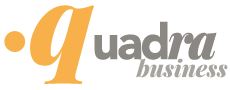
<style>
.page{position:relative;width:230px;height:90px;background:#ffffff}
.page>*{position:absolute;margin:0}
.t1{font:109.8px "PlayfairDisplay-BlackItalic";letter-spacing:-0.05em;color:#f8b04a}
.t2{font:49px "Avenir-Black";letter-spacing:-0.055em;color:#8b8782}
.t3{font:49px "PlayfairDisplay-BlackItalic";letter-spacing:-0.055em;color:#8b8782}
.t4{font:23px "PlayfairDisplay-BlackItalic";color:#a7a39e}
</style>
<div class="page">
<p class="t1" style="left:30px;top:5px;width:65px;height:79px">q</p>
<p class="t2" style="left:94px;top:21px;width:123px;height:39px">uad<span class="t3">ra</span></p>
<p class="t4" style="left:136px;top:58px;width:92px;height:20px">business</p>
</div>
